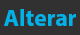
<style>
.page{position:relative;width:80px;height:35px;background:#313131}
.page>*{position:absolute;margin:0}
.t1{font:23.5px "MyriadPro-Bold";color:#00b2e8}
</style>
<div class="page">
<p class="t1" style="left:4px;top:9px;width:72px;height:17px">Alterar</p>
</div>
